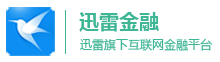
<style>
.page{position:relative;width:220px;height:62px;background:#ffffff}
.page>*{position:absolute;margin:0}
.t1{font:20px "MicrosoftYaHei-Bold";color:#3eb595}
.t2{font:12px "MicrosoftYaHei";color:#3eb595}
</style>
<div class="page">
<p class="t1" style="left:79px;top:12px;width:80px;height:20px">迅雷金融</p>
<p class="t2" style="left:80px;top:38px;width:132px;height:13px">迅雷旗下互联网金融平台</p>
</div>
